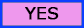
<style>
.page{position:relative;width:84px;height:28px;background:#ee98ed}
.page>*{position:absolute;margin:0}
.t1{font:17px "Verdana";color:#000000;font-weight:bold}
</style>
<div class="page">
<p class="t1" style="left:25px;top:7px;width:34px;height:13px">YES</p>
</div>
